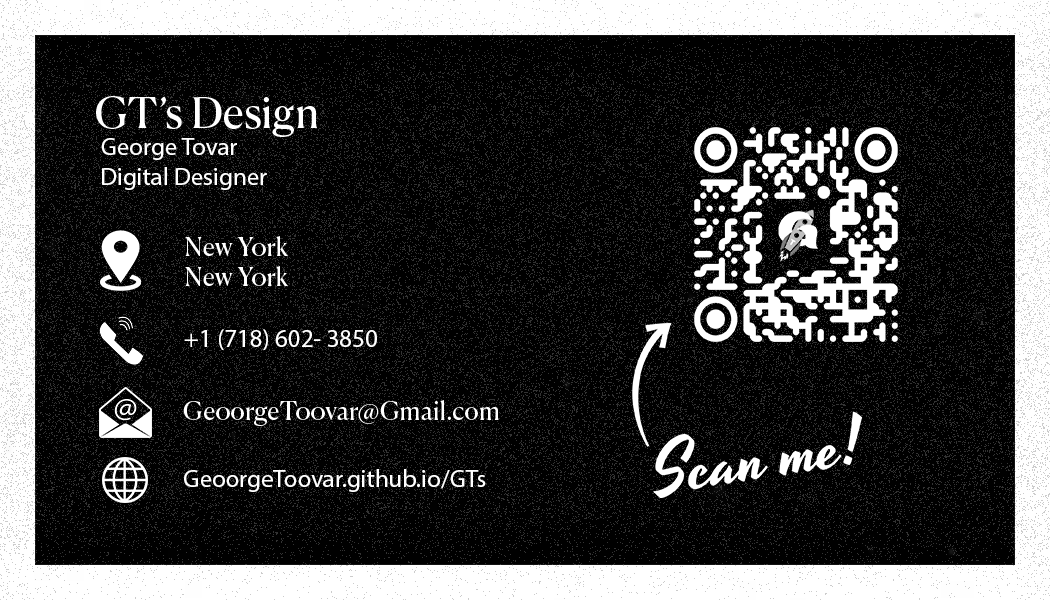
<style>
.page{position:relative;width:1050px;height:600px;background:#000000}
.page>*{position:absolute;margin:0}
.t1{font:41.7px "CanelaDeck-Regular";color:#ffffff}
.t2{font:25px "MyriadPro-Regular";color:#ffffff}
.t3{font:25px "CanelaDeck-Regular";color:#ffffff}
</style>
<div class="page">
<p class="t1" style="left:96px;top:96px;width:221px;height:41px">GT’s Design</p>
<p class="t2" style="left:101px;top:138px;width:166px;height:52px">George Tovar<br>Digital Designer</p>
<p class="t3" style="left:185px;top:236px;width:104px;height:50px">New York<br>New York</p>
<p class="t2" style="left:184px;top:329px;width:193px;height:22px">+1 (718) 602- 3850</p>
<p class="t3" style="left:183px;top:400px;width:316px;height:26px">GeoorgeToovar@Gmail.com</p>
<p class="t2" style="left:184px;top:469px;width:302px;height:23px">GeoorgeToovar.github.io/GTs</p>
</div>
